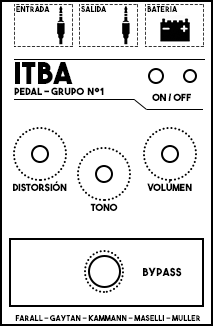
<style>
.page{position:relative;width:213px;height:326px;background:#ffffff}
.page>*{position:absolute;margin:0}
.t1{font:8px "TheBoldFont";color:#000000}
.t2{font:30px "TheBoldFont";color:#000000}
.t3{font:10px "TheBoldFont";color:#000000}
.t4{font:11px "TheBoldFont";color:#000000}
</style>
<div class="page">
<p class="t1" style="left:16px;top:6px;width:34px;height:6px">ENTRADA</p>
<p class="t1" style="left:81px;top:6px;width:26px;height:6px">SALIDA</p>
<p class="t1" style="left:147px;top:6px;width:31px;height:6px">BATERIA</p>
<p class="t2" style="left:15px;top:62px;width:58px;height:22px">ITBA</p>
<p class="t3" style="left:14px;top:87px;width:90px;height:8px">PEDAL - GRUPO  N°1</p>
<p class="t3" style="left:152px;top:93px;width:39px;height:8px">ON / OFF</p>
<p class="t3" style="left:13px;top:181px;width:54px;height:11px">Distorsión</p>
<p class="t3" style="left:147px;top:181px;width:45px;height:10px">VOLÚMEN</p>
<p class="t3" style="left:90px;top:203px;width:28px;height:8px">TONO</p>
<p class="t4" style="left:143px;top:267px;width:39px;height:10px">BYPASS</p>
<p class="t1" style="left:15px;top:315px;width:186px;height:6px">FARALL - GAYTAN - KAMMANN - MASELLI - MULLER</p>
</div>
